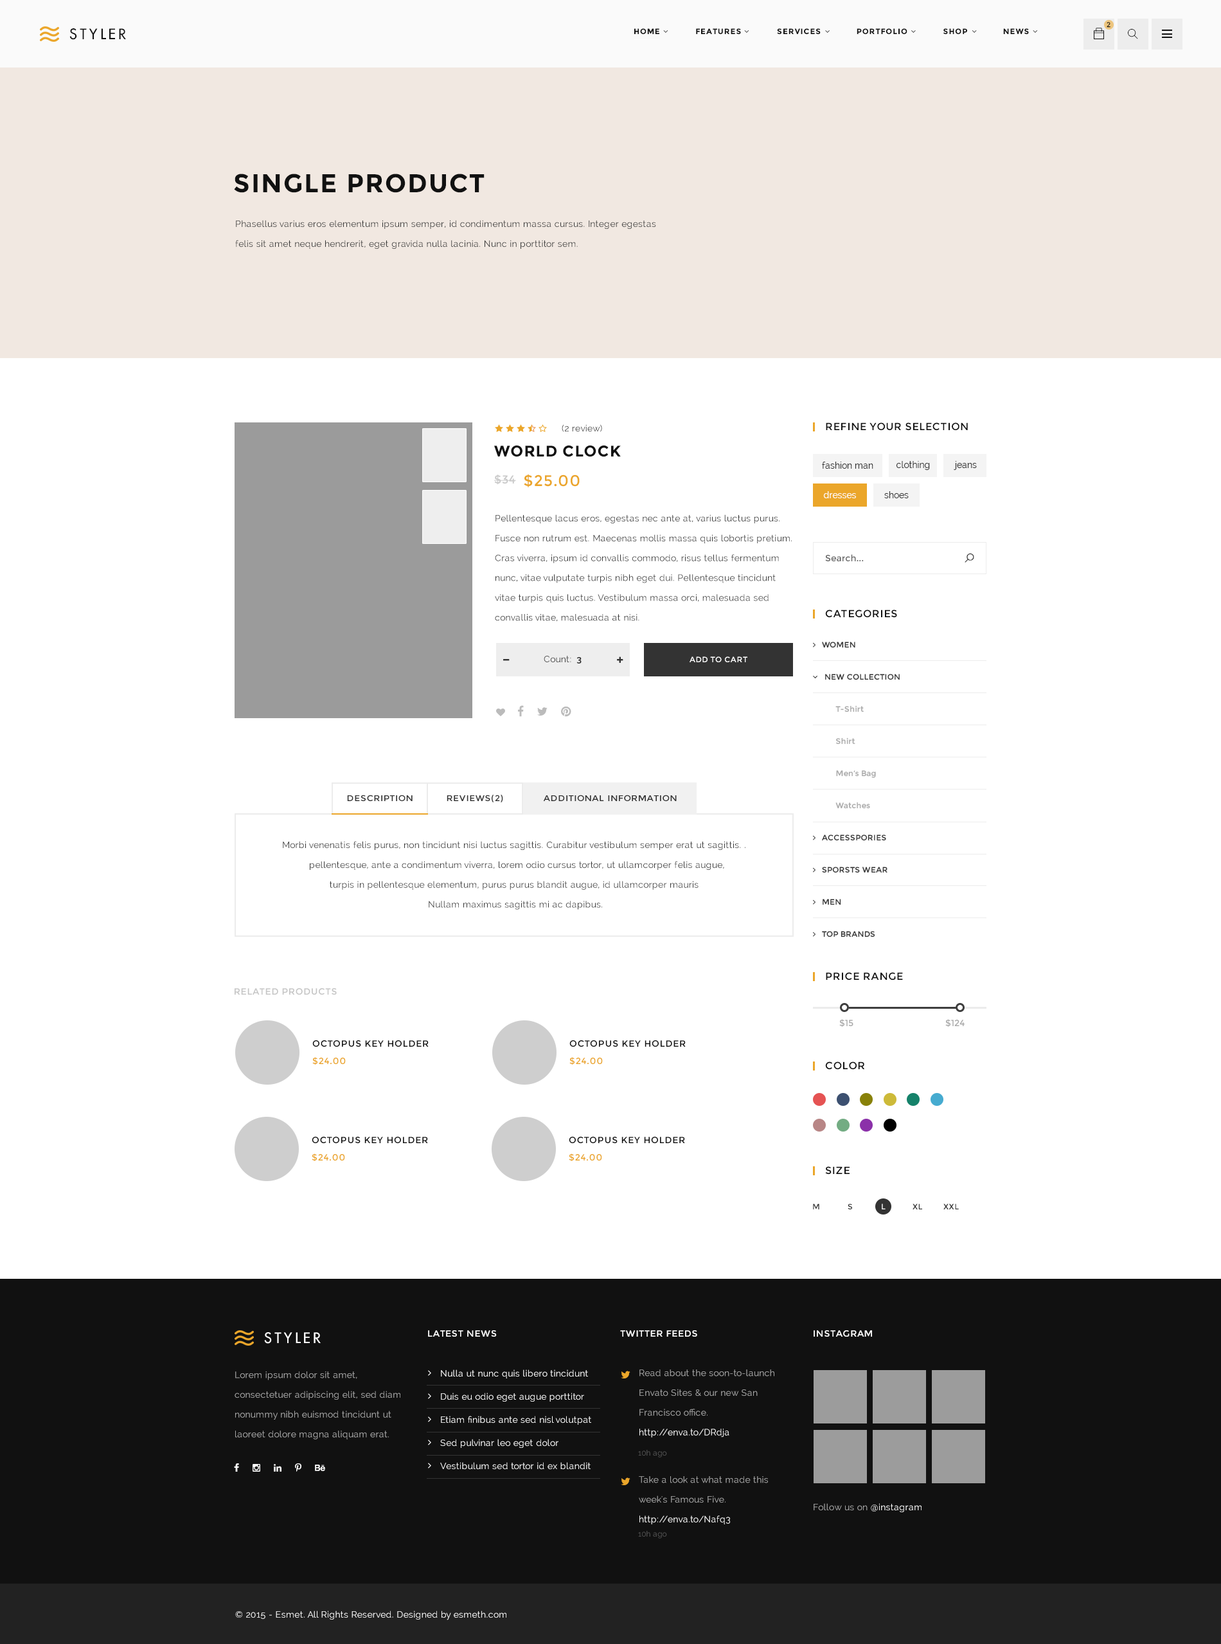
<style>
.page{position:relative;width:1221px;height:1644px;background:#ffffff}
.page>*{position:absolute;margin:0}
.t1{font:14.1px "FuturaLT";letter-spacing:0.2em;color:#111111;text-transform:uppercase}
.t2{font:7.7px "Montserrat-Bold";letter-spacing:0.075em;color:#111111;text-transform:uppercase}
.t3{font:7.1px "Montserrat-Regular";letter-spacing:0.075em;color:#111111;text-transform:uppercase}
.t4{font:25.7px "Montserrat-Bold";letter-spacing:0.05em;color:#111111;text-transform:uppercase}
.t5{font:9px/19.8px "Raleway";letter-spacing:0.02em;color:#333333}
.t6{font:9px "Raleway";letter-spacing:0.02em;color:#333333}
.t7{font:10.3px "Montserrat-Regular";letter-spacing:0.05em;color:#111111;text-transform:uppercase}
.t8{font:15.4px "Montserrat-Bold";letter-spacing:0.05em;color:#111111;text-transform:uppercase}
.t9{font:9px "Raleway";color:#333333}
.t10{font:15.4px "Montserrat-Regular";letter-spacing:0.05em;color:#eba62a;text-transform:uppercase}
.t11{font:11.6px "Montserrat-Regular";letter-spacing:0.05em;color:#cacaca;text-transform:uppercase}
.t12{font:9px "Raleway";color:#ffffff}
.t13{font:9px "Montserrat-Regular";color:#666666}
.t14{font:9px "Raleway-Bold";letter-spacing:0.02em;color:#333333}
.t15{font:7.7px "Montserrat-Regular";letter-spacing:0.05em;color:#ffffff;text-transform:uppercase}
.t16{font:8.4px "Montserrat-Regular";letter-spacing:0.05em;color:#333333;scale:1.05 1}
.t17{font:9px "Montserrat-Regular";letter-spacing:0.05em;color:#c5c5c5;text-transform:uppercase}
.t18{font:9px "Montserrat-Regular";color:#a9a9a9}
.t19{font:9px "Montserrat-Regular";letter-spacing:0.05em;color:#111111;text-transform:uppercase}
.t20{font:9px "Montserrat-Regular";letter-spacing:0.05em;color:#eba62a;text-transform:uppercase}
.t21{font:7.7px "Montserrat-Regular";letter-spacing:0.05em;color:#333333;text-transform:uppercase}
.t22{font:14.1px "FuturaLT";letter-spacing:0.2em;color:#ffffff;text-transform:uppercase}
.t23{font:9px "Montserrat-Regular";letter-spacing:0.05em;color:#ffffff;text-transform:uppercase}
.t24{font:9px/19.8px "Raleway";letter-spacing:0.02em;color:#a9a9a9}
.t25{font:9px/23.1px "Raleway";letter-spacing:0.02em;color:#ffffff}
.t26{font:9px/19.8px "Raleway";letter-spacing:0.02em;color:#ffffff}
.t27{font:7.7px "Raleway";letter-spacing:0.02em;color:#545454}
.t28{font:9px "Raleway";letter-spacing:0.02em;color:#a9a9a9}
.t29{font:9px "Raleway";letter-spacing:0.02em;color:#ffffff}
</style>
<div class="page">
<p class="t1" style="left:69px;top:28px;width:57px;height:12px">styler</p>
<p class="t2" style="left:634px;top:28px;width:395px;height:6px">HOME              FEATURES              SERVICES              portfolio              SHOP              NEWS</p>
<p class="t3" style="left:1107px;top:22px;width:4px;height:6px">2</p>
<p class="t4" style="left:234px;top:174px;width:251px;height:19px">single product</p>
<p class="t5" style="left:235px;top:220px;width:421px;height:29px">Phasellus varius eros elementum ipsum semper, id condimentum massa cursus. Integer egestas felis sit amet neque hendrerit, eget gravida nulla lacinia. Nunc in porttitor sem.</p>
<p class="t6" style="left:562px;top:424px;width:40px;height:8px">(2 review)</p>
<p class="t7" style="left:826px;top:422px;width:142px;height:9px">refine your selection</p>
<p class="t8" style="left:494px;top:445px;width:127px;height:12px">world clock</p>
<p class="t9" style="left:822px;top:462px;width:52px;height:7px">fashion man</p>
<p class="t9" style="left:896px;top:461px;width:34px;height:9px">clothing</p>
<p class="t9" style="left:954px;top:461px;width:23px;height:9px">jeans</p>
<p class="t10" style="left:494px;top:474px;width:86px;height:13px"><span class="t11">$34  </span>$25.00</p>
<p class="t12" style="left:824px;top:491px;width:32px;height:7px">dresses</p>
<p class="t9" style="left:885px;top:491px;width:24px;height:7px">shoes</p>
<p class="t5" style="left:495px;top:514px;width:297px;height:108px">Pellentesque lacus eros, egestas nec ante at, varius luctus purus. Fusce non rutrum est. Maecenas mollis massa quis lobortis pretium. Cras viverra, ipsum id convallis commodo, risus tellus fermentum nunc, vitae vulputate turpis nibh eget dui. Pellentesque tincidunt vitae turpis quis luctus. Vestibulum massa orci, malesuada sed convallis vitae, malesuada at nisi.</p>
<p class="t13" style="left:825px;top:554px;width:39px;height:7px">Search...</p>
<p class="t7" style="left:825px;top:609px;width:72px;height:9px">categories</p>
<p class="t6" style="left:544px;top:656px;width:38px;height:7px">Count: <span class="t14"> 3</span></p>
<p class="t15" style="left:690px;top:656px;width:58px;height:6px">add to cart</p>
<p class="t16" style="left:347px;top:795px;width:66px;height:6px">DESCRIPTION</p>
<p class="t16" style="left:447px;top:795px;width:56px;height:7px">REVIEWS(2)</p>
<p class="t16" style="left:543px;top:795px;width:134px;height:6px">ADDITIONAL INFORMATION</p>
<p class="t5" style="left:283px;top:841px;width:463px;height:69px;text-align:center">Morbi venenatis felis purus, non tincidunt nisi luctus sagittis. Curabitur vestibulum semper erat ut sagittis. . <br> pellentesque, ante a condimentum viverra, lorem odio cursus tortor, ut ullamcorper felis augue,<br>turpis in pellentesque elementum, purus purus blandit augue, id ullamcorper mauris <br>Nullam maximus sagittis mi ac dapibus.</p>
<p class="t7" style="left:826px;top:972px;width:77px;height:8px">price range</p>
<p class="t17" style="left:235px;top:988px;width:102px;height:7px">Related products</p>
<p class="t18" style="left:840px;top:1019px;width:14px;height:8px">$15</p>
<p class="t18" style="left:946px;top:1019px;width:19px;height:8px">$124</p>
<p class="t19" style="left:312px;top:1040px;width:117px;height:7px">Octopus Key Holder</p>
<p class="t19" style="left:570px;top:1040px;width:116px;height:7px">Octopus Key Holder</p>
<p class="t20" style="left:312px;top:1057px;width:34px;height:8px">$24.00</p>
<p class="t20" style="left:570px;top:1057px;width:33px;height:8px">$24.00</p>
<p class="t7" style="left:825px;top:1061px;width:40px;height:9px">color</p>
<p class="t19" style="left:312px;top:1137px;width:116px;height:6px">Octopus Key Holder</p>
<p class="t19" style="left:569px;top:1137px;width:116px;height:6px">Octopus Key Holder</p>
<p class="t20" style="left:312px;top:1153px;width:33px;height:8px">$24.00</p>
<p class="t20" style="left:569px;top:1153px;width:33px;height:8px">$24.00</p>
<p class="t7" style="left:825px;top:1166px;width:25px;height:8px">size</p>
<p class="t21" style="left:813px;top:1203px;width:7px;height:6px">M</p>
<p class="t21" style="left:848px;top:1203px;width:4px;height:6px">S</p>
<p class="t15" style="left:882px;top:1203px;width:4px;height:6px">L</p>
<p class="t21" style="left:913px;top:1203px;width:10px;height:6px">Xl</p>
<p class="t21" style="left:944px;top:1203px;width:15px;height:6px">xxl</p>
<p class="t22" style="left:264px;top:1332px;width:57px;height:12px">styler</p>
<p class="t23" style="left:428px;top:1330px;width:69px;height:6px">latest news</p>
<p class="t23" style="left:620px;top:1330px;width:78px;height:6px">twitter feeds</p>
<p class="t23" style="left:814px;top:1330px;width:58px;height:6px">instagram</p>
<p class="t24" style="left:235px;top:1371px;width:166px;height:68px">Lorem ipsum dolor sit amet, consectetuer adipiscing elit, sed diam nonummy nibh euismod tincidunt ut laoreet dolore magna aliquam erat.</p>
<p class="t25" style="left:440px;top:1369px;width:151px;height:101px">Nulla ut nunc quis libero tincidunt<br>Duis eu odio eget augue porttitor<br>Etiam finibus ante sed nisl volutpat<br>Sed pulvinar leo eget dolor<br>Vestibulum sed tortor id ex blandit</p>
<p class="t24" style="left:640px;top:1369px;width:135px;height:68px">Read about the soon-to-launch Envato Sites &amp; our new San Francisco office. <span class="t26">http://enva.to/DRdja</span></p>
<p class="t27" style="left:638px;top:1450px;width:29px;height:7px">10h ago</p>
<p class="t24" style="left:639px;top:1476px;width:129px;height:48px">Take a look at what made this week's Famous Five. <span class="t26">http://enva.to/Nafq3</span></p>
<p class="t28" style="left:814px;top:1503px;width:108px;height:9px">Follow us on <span class="t29">@instagram</span></p>
<p class="t27" style="left:638px;top:1531px;width:29px;height:7px">10h ago</p>
<p class="t29" style="left:235px;top:1610px;width:272px;height:10px">© 2015 - Esmet. All Rights Reserved. Designed by esmeth.com</p>
</div>
